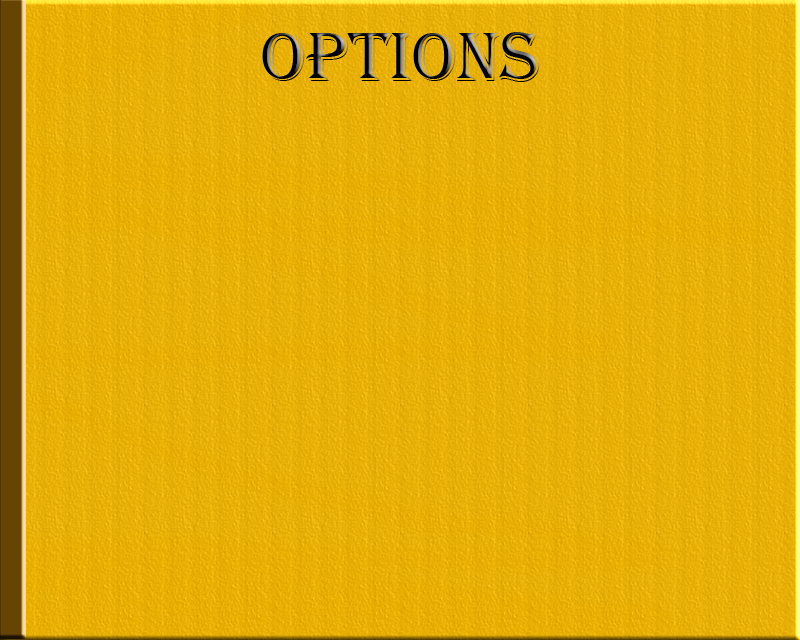
<style>
.page{position:relative;width:800px;height:640px}
.page>*{position:absolute;margin:0}
.t1{font:72px "Algerian"}
</style>
<div class="page">
<p class="t1" style="left:262px;top:32px;width:278px;height:50px">OPtions</p>
</div>
